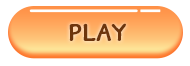
<style>
.page{position:relative;width:190px;height:66px;background:#ffffff}
.page>*{position:absolute;margin:0}
.t1{font:33.9px "Arabica";color:#6d350c}
</style>
<div class="page">
<p class="t1" style="left:69px;top:23px;width:57px;height:18px">play</p>
</div>
